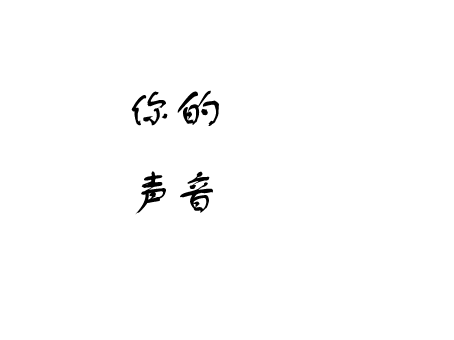
<style>
.page{position:relative;width:454px;height:340px;background:#ffffff}
.page>*{position:absolute;margin:0}
.t1{font:48px "FZSTK--GBK1-0";color:#000000}
</style>
<div class="page">
<p class="t1" style="left:131px;top:90px;width:88px;height:125px;text-align:center">你的<br>声音</p>
</div>
